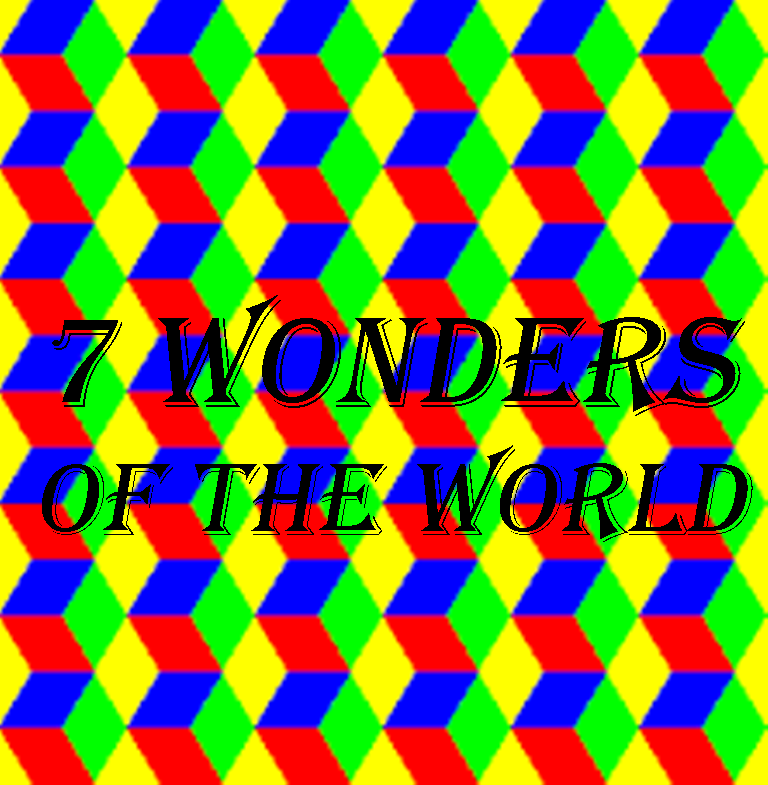
<style>
.page{position:relative;width:768px;height:785px}
.page>*{position:absolute;margin:0}
.t1{font:106.6px/32px "Algerian";color:#000000;font-style:italic}
.t2{font:133.3px/32px "Algerian";color:#000000;font-style:italic}
</style>
<div class="page">
<p class="t1" style="left:42px;top:295px;width:711px;height:247px"><span class="t2">7 Wonders<br><br><br><br></span>of the world</p>
</div>
